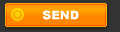
<style>
.page{position:relative;width:120px;height:32px}
.page>*{position:absolute;margin:0}
.t1{font:12px "Arial-Black";color:#ffffff;text-transform:uppercase}
</style>
<div class="page">
<p class="t1" style="left:42px;top:10px;width:37px;height:10px">Send</p>
</div>
